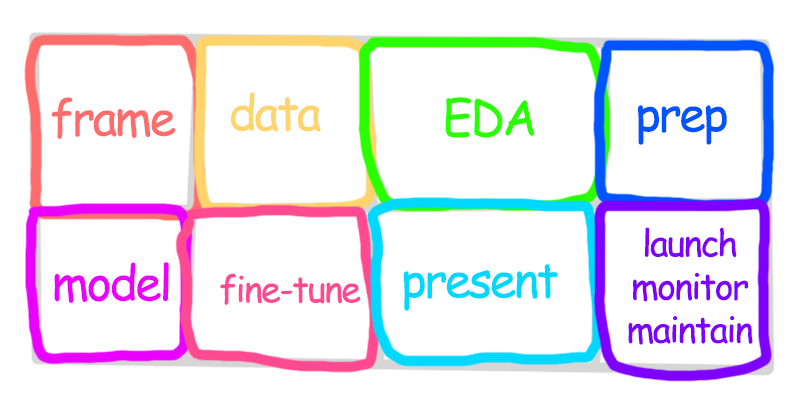
<style>
.page{position:relative;width:800px;height:400px;background:#ffffff}
.page>*{position:absolute;margin:0}
.t1{font:48px "ComicSansMS";letter-spacing:-0.05em;color:#ff6c6c}
.t2{font:48px "ComicSansMS";letter-spacing:-0.05em;color:#ffd46c}
.t3{font:48px "ComicSansMS";letter-spacing:-0.05em;color:#2aff00}
.t4{font:48px "ComicSansMS";letter-spacing:-0.05em;color:#0054ff}
.t5{font:36px "ComicSansMS";letter-spacing:-0.05em;color:#7e00ff}
.t6{font:48px "ComicSansMS";letter-spacing:-0.05em;color:#ea00ff}
.t7{font:48px "ComicSansMS";letter-spacing:-0.05em;color:#00d8ff}
.t8{font:36px "ComicSansMS";letter-spacing:-0.05em;color:#ff4a92}
</style>
<div class="page">
<p class="t1" style="left:51px;top:97px;width:125px;height:42px">frame</p>
<p class="t2" style="left:231px;top:92px;width:90px;height:40px">data</p>
<p class="t3" style="left:445px;top:97px;width:90px;height:41px">EDA</p>
<p class="t4" style="left:638px;top:105px;width:89px;height:40px">prep</p>
<p class="t5" style="left:628px;top:227px;width:125px;height:118px;text-align:center">launch<br>monitor<br>maintain</p>
<p class="t6" style="left:54px;top:262px;width:115px;height:41px">model</p>
<p class="t7" style="left:403px;top:264px;width:155px;height:47px">present</p>
<p class="t8" style="left:220px;top:273px;width:141px;height:32px">fine-tune</p>
</div>
